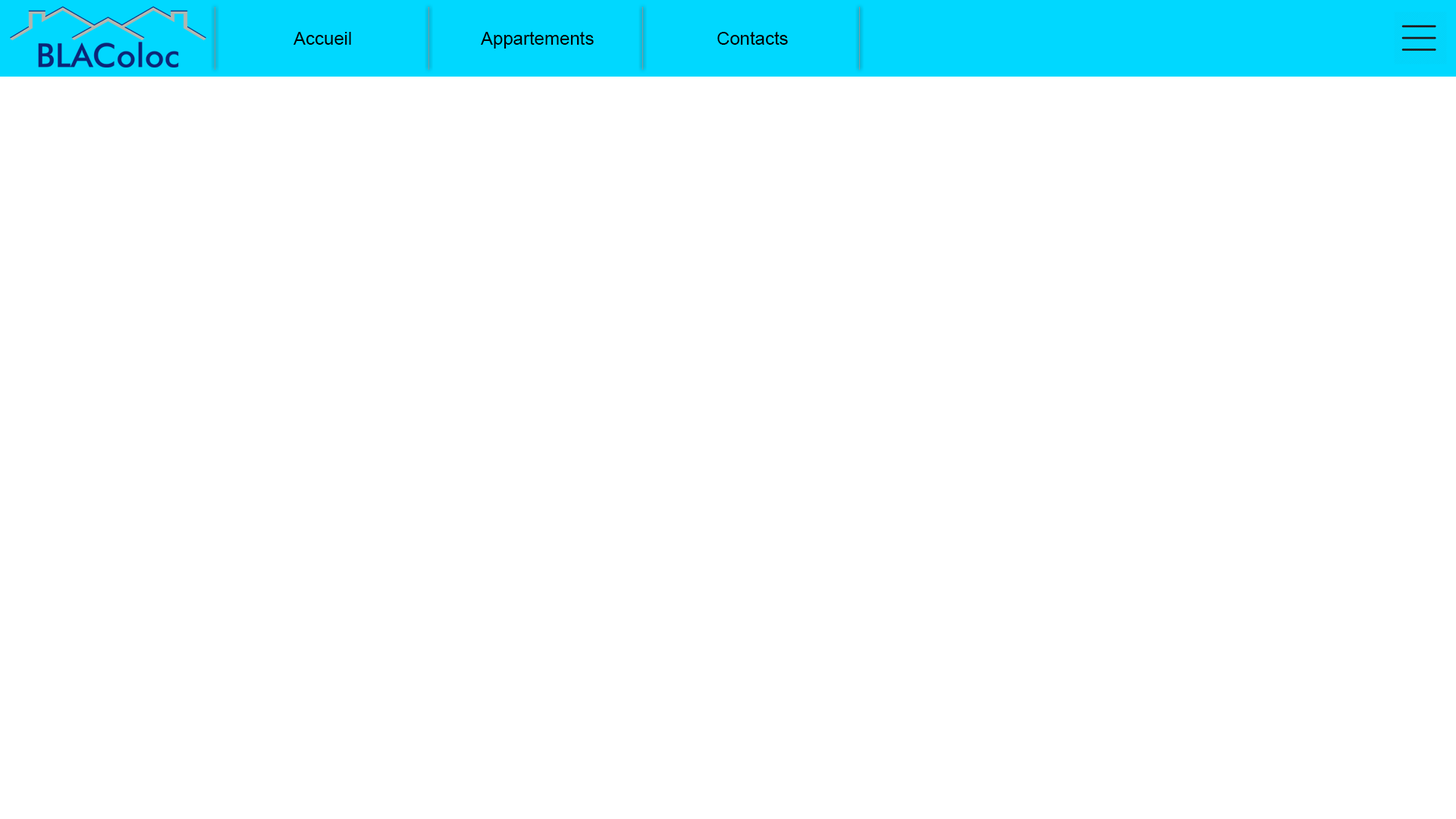
<style>
.page{position:relative;width:1456px;height:819px;background:#ffffff}
.page>*{position:absolute;margin:0}
.t1{font:18.2px "ArialMT";color:#010101}
</style>
<div class="page">
<p class="t1" style="left:293px;top:32px;width:58px;height:13px">Accueil</p>
<p class="t1" style="left:481px;top:31px;width:113px;height:18px">Appartements</p>
<p class="t1" style="left:717px;top:31px;width:71px;height:14px">Contacts</p>
</div>
